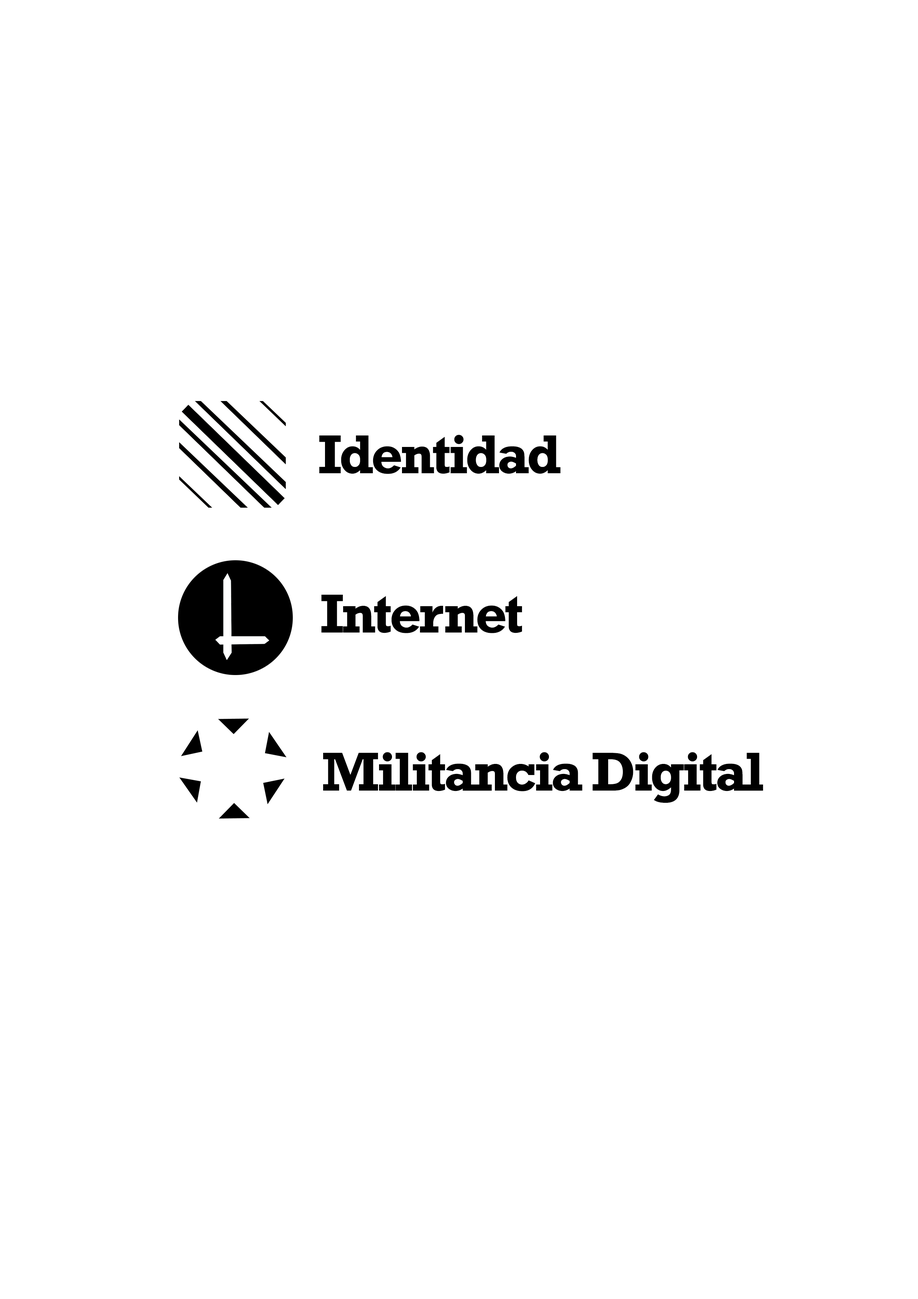
<style>
.page{position:relative;width:918px;height:1299px;background:#ffffff}
.page>*{position:absolute;margin:0}
.t1{font:55.5px "Rockwell-Bold";letter-spacing:-0.05em;color:#000000}
</style>
<div class="page">
<p class="t1" style="left:319px;top:435px;width:242px;height:39px">Identidad</p>
<p class="t1" style="left:321px;top:595px;width:201px;height:38px">Internet</p>
<p class="t1" style="left:323px;top:752px;width:440px;height:51px">Militancia Digital</p>
</div>
